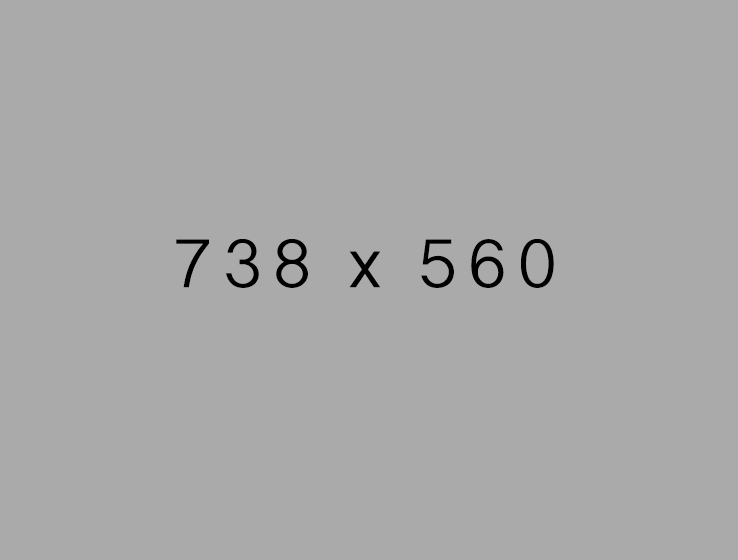
<style>
.page{position:relative;width:738px;height:560px;background:#aaaaaa}
.page>*{position:absolute;margin:0}
.t1{font:72px "KannadaSangamMN";letter-spacing:0.14em;color:#000000}
</style>
<div class="page">
<p class="t1" style="left:176px;top:239px;width:378px;height:49px">738 x 560</p>
</div>
